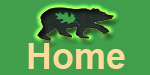
<style>
.page{position:relative;width:150px;height:75px;background:#419f4b}
.page>*{position:absolute;margin:0}
.t1{font:36px "Arial-BoldMT";color:#ffda9d}
</style>
<div class="page">
<p class="t1" style="left:28px;top:43px;width:97px;height:26px">Home</p>
</div>
